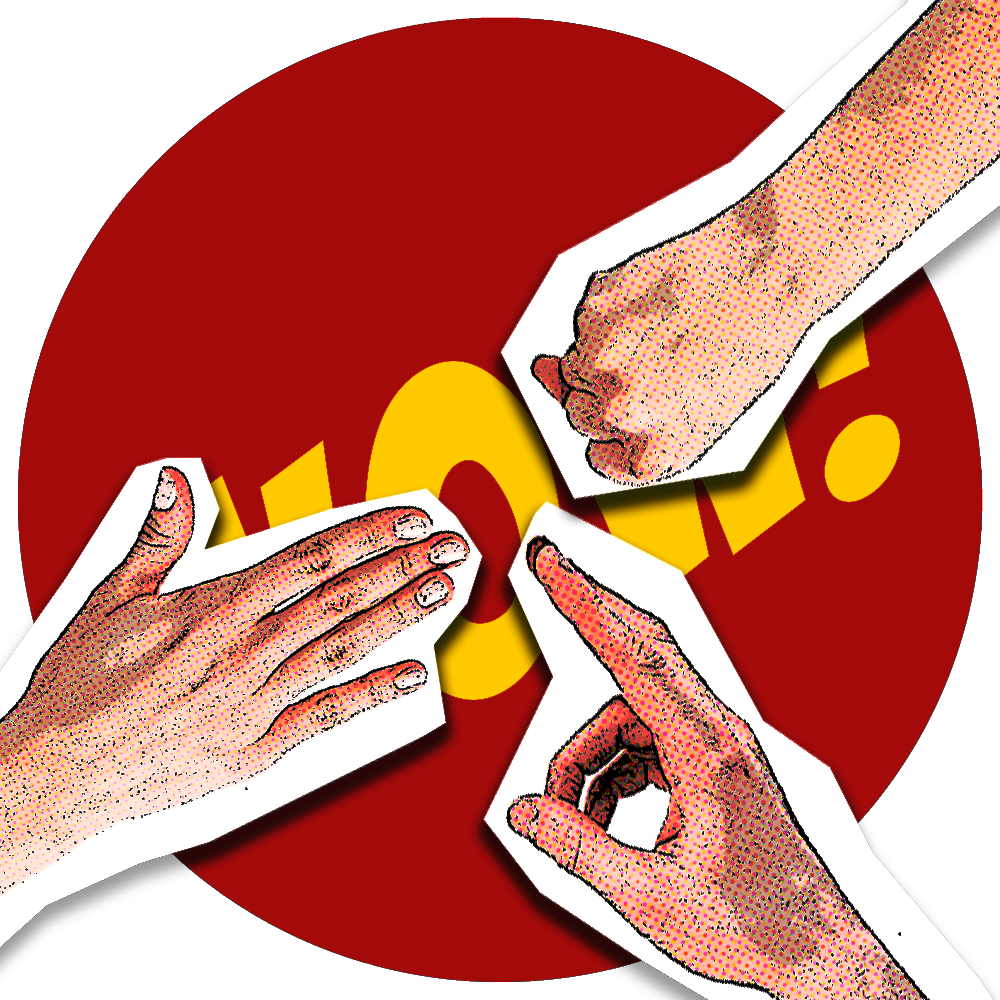
<style>
.page{position:relative;width:1000px;height:1000px;background:#a40a0a}
.page>*{position:absolute;margin:0}
.t1{font:420.8px "BadaBoomBB"}
</style>
<div class="page">
<p class="t1" style="left:106px;top:155px;width:794px;height:679px;rotate:-28deg">WOW!</p>
</div>
